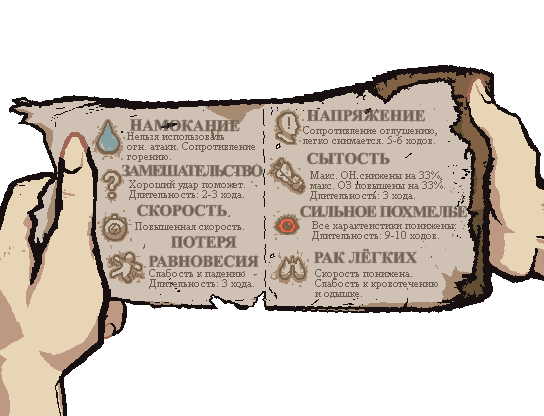
<style>
.page{position:relative;width:544px;height:416px;background:#ffffff}
.page>*{position:absolute;margin:0}
.t1{font:16px "TimesNewRomanPS-BoldMT";color:#6c6052}
.t2{font:11px/10px "TimesNewRomanPSMT";color:#6c6052}
.t3{font:16px "TimesNewRomanPS-BoldMT";letter-spacing:-0.1em;color:#6c6052}
.t4{font:16px "TimesNewRomanPS-BoldMT";letter-spacing:-0.05em;color:#6c6052}
.t5{font:11px "TimesNewRomanPSMT";color:#6c6052}
.t6{font:16px "TimesNewRomanPS-BoldMT";letter-spacing:-0.01em;color:#6c6052}
</style>
<div class="page">
<p class="t1" style="left:307px;top:110px;width:118px;height:11px">НАПРЯЖЕНИЕ</p>
<p class="t1" style="left:130px;top:119px;width:110px;height:12px">НАМОКАНИЕ</p>
<p class="t2" style="left:303px;top:126px;width:134px;height:19px">Сопротивление оглушению,<br>легко снимается. 5-6 ходов.</p>
<p class="t2" style="left:127px;top:132px;width:128px;height:30px">Нельзя использовать<br>огн. атаки. Сопротивление<br>горению.</p>
<p class="t1" style="left:307px;top:153px;width:83px;height:11px">СЫТОСТЬ</p>
<p class="t3" style="left:122px;top:165px;width:141px;height:12px">ЗАМЕШАТЕЛЬСТВО</p>
<p class="t2" style="left:310px;top:171px;width:135px;height:30px">Макс. ОН снижены на 33%,<br>макс. ОЗ повышены на 33%.<br>Длительность: 3 хода.</p>
<p class="t2" style="left:129px;top:180px;width:116px;height:20px">Хороший удар поможет.<br>Длительность: 2-3 хода.</p>
<p class="t1" style="left:137px;top:205px;width:90px;height:11px">СКОРОСТЬ</p>
<p class="t4" style="left:300px;top:206px;width:167px;height:12px">СИЛЬНОЕ ПОХМЕЛЬЕ</p>
<p class="t5" style="left:135px;top:222px;width:109px;height:10px">Повышенная скорость.</p>
<p class="t2" style="left:312px;top:221px;width:144px;height:20px">Все характеистики понижены.<br>Длительность: 9-10 ходов.</p>
<p class="t6" style="left:149px;top:236px;width:110px;height:31px;text-align:center">ПОТЕРЯ<br>РАВНОВЕСИЯ</p>
<p class="t1" style="left:314px;top:249px;width:103px;height:14px">РАК ЛЁГКИХ</p>
<p class="t2" style="left:149px;top:269px;width:105px;height:20px">Слабость к падению<br>Длительность: 3 хода.</p>
<p class="t2" style="left:315px;top:269px;width:123px;height:29px">Скорость понижена.<br>Слабость к кровотечению<br>и одышке.</p>
</div>
